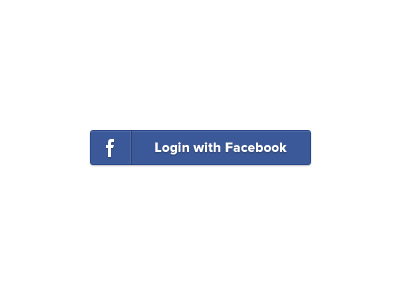
<style>
.page{position:relative;width:400px;height:300px;background:#ffffff}
.page>*{position:absolute;margin:0}
.t1{font:14px "ProximaNova-Extrabld";letter-spacing:0.01em;color:#ffffff}
</style>
<div class="page">
<p class="t1" style="left:155px;top:142px;width:132px;height:13px">Login with Facebook</p>
</div>
